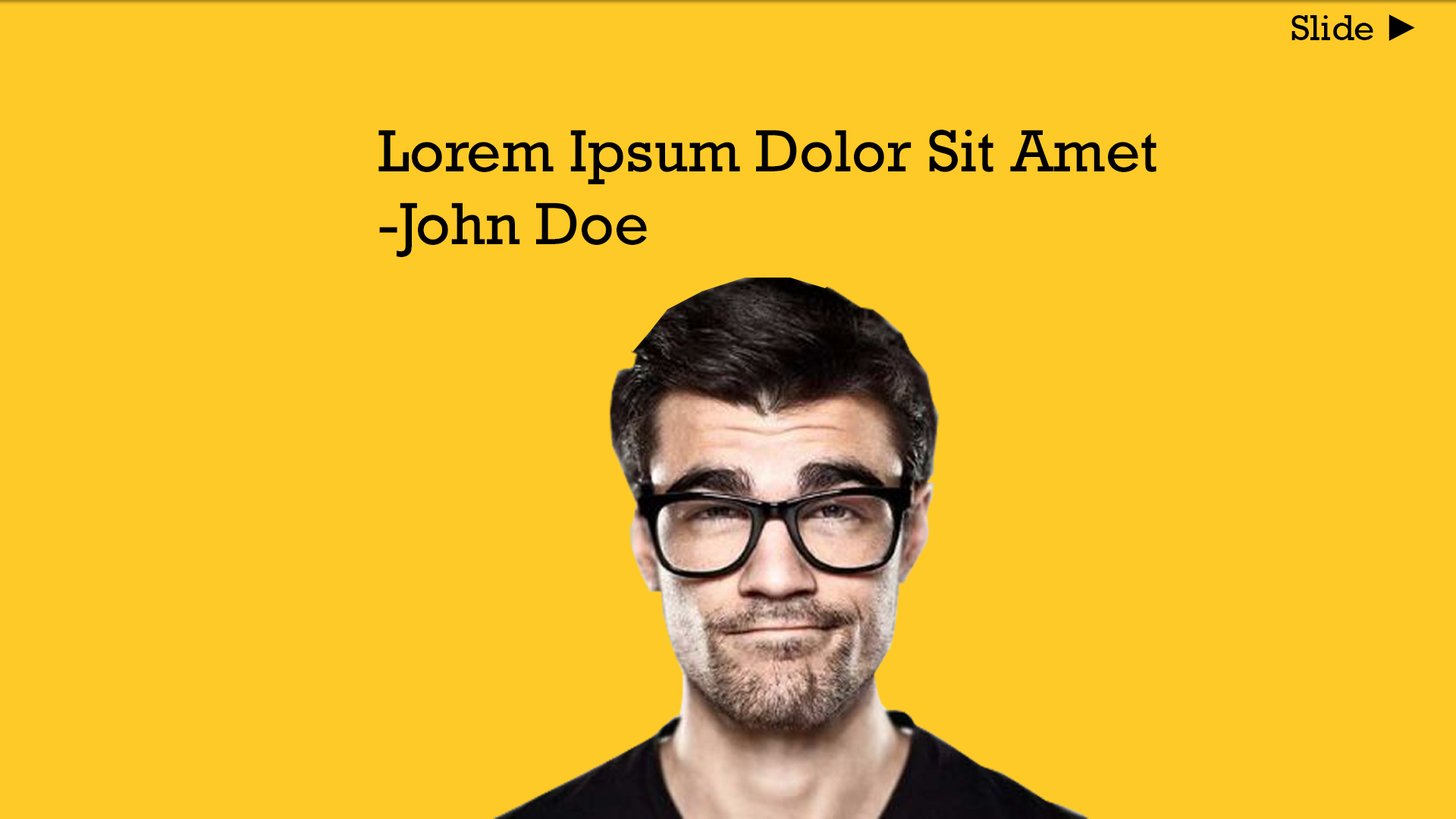
<style>
.page{position:relative;width:1456px;height:819px;background:#feca28}
.page>*{position:absolute;margin:0}
.t1{font:36.4px "Rockwell";color:#000000}
.t2{font:36.4px "TimesNewRomanPSMT";color:#000000}
.t3{font:60.7px "Rockwell";color:#000000}
</style>
<div class="page">
<p class="t1" style="left:1291px;top:14px;width:124px;height:27px">Slide <span class="t2">►</span></p>
<p class="t3" style="left:378px;top:130px;width:778px;height:127px">Lorem Ipsum Dolor Sit Amet<br>-John Doe</p>
</div>
